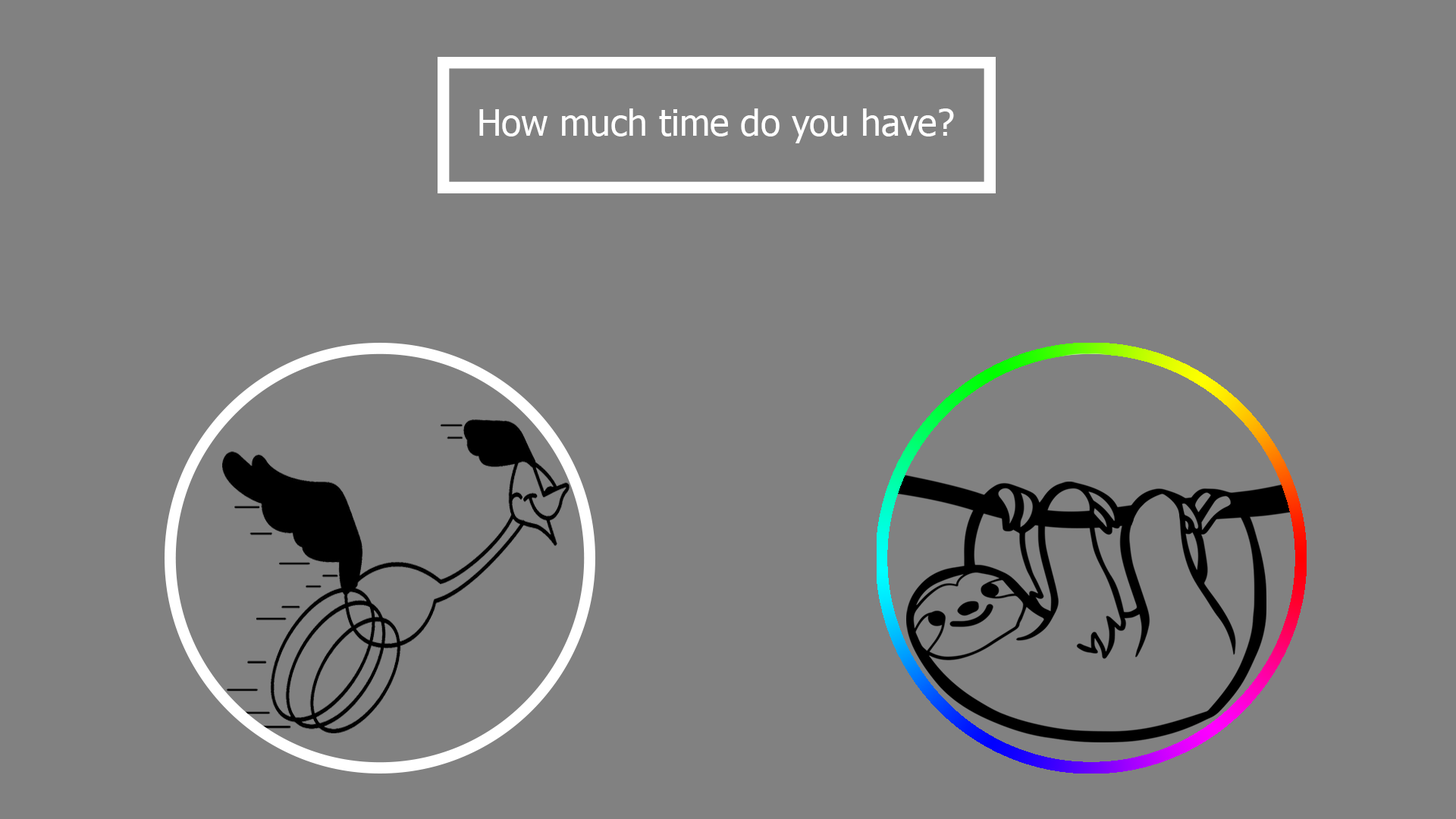
<style>
.page{position:relative;width:1456px;height:819px;background:#818181}
.page>*{position:absolute;margin:0}
.t1{font:36.4px "Tahoma";color:#ffffff}
</style>
<div class="page">
<p class="t1" style="left:479px;top:108px;width:475px;height:35px">How much time do you have?</p>
</div>
